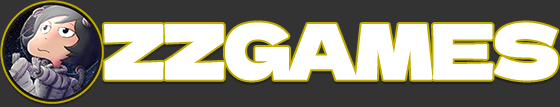
<style>
.page{position:relative;width:560px;height:107px;background:#333333}
.page>*{position:absolute;margin:0}
.t1{font:73.6px "DelaGothicOne-Regular";letter-spacing:-0.07em;color:#ffffff;font-weight:bold}
</style>
<div class="page">
<p class="t1" style="left:103px;top:22px;width:455px;height:59px">ZZGAMES</p>
</div>
